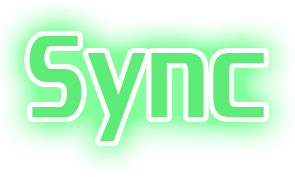
<style>
.page{position:relative;width:295px;height:177px;background:#ffffff}
.page>*{position:absolute;margin:0}
.t1{font:100px "Unispace-Bold";color:#5dec78}
</style>
<div class="page">
<p class="t1" style="left:29px;top:36px;width:235px;height:105px">Sync</p>
</div>
